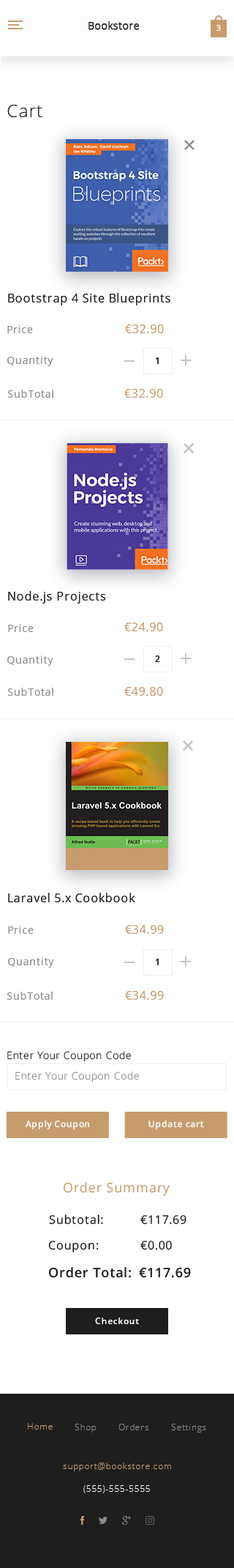
<style>
.page{position:relative;width:234px;height:1568px;background:#ffffff}
.page>*{position:absolute;margin:0}
.t1{font:17.6px "OpenSans-Light";letter-spacing:0.05em;color:#1e1e1c}
.t2{font:11.7px "OpenSans";letter-spacing:0.05em;color:#1e1e1c}
.t3{font:10.3px "OpenSans";letter-spacing:0.05em;color:#8c8c8c}
.t4{font:11.7px "OpenSans";letter-spacing:0.05em;color:#c69c6d}
.t5{font:8.8px "OpenSans-Semibold";letter-spacing:0.05em;color:#1e1e1c}
.t6{font:10.3px "OpenSans-Light";letter-spacing:0.05em;color:#1e1e1c}
.t7{font:10.3px "OpenSans-Light";letter-spacing:0.05em;color:#8c8c8c}
.t8{font:8.8px "OpenSans-Semibold";letter-spacing:0.05em;color:#fffefe}
.t9{font:13.2px "OpenSans";letter-spacing:0.05em;color:#c69c6d}
.t10{font:13.2px "OpenSans-Semibold";letter-spacing:0.05em;color:#1e1e1c}
</style>
<div class="page">
<p class="t1" style="left:7px;top:105px;width:35px;height:12px">Cart</p>
<p class="t2" style="left:8px;top:293px;width:163px;height:12px">Bootstrap 4 Site Blueprints</p>
<p class="t3" style="left:7px;top:325px;width:26px;height:8px">Price</p>
<p class="t4" style="left:125px;top:324px;width:39px;height:9px">€32.90</p>
<p class="t3" style="left:7px;top:356px;width:46px;height:10px">Quantity</p>
<p class="t5" style="left:156px;top:357px;width:3px;height:7px">1</p>
<p class="t3" style="left:8px;top:390px;width:45px;height:8px">SubTotal</p>
<p class="t4" style="left:125px;top:389px;width:38px;height:9px">€32.90</p>
<p class="t2" style="left:8px;top:591px;width:97px;height:12px">Node.js Projects</p>
<p class="t3" style="left:8px;top:624px;width:26px;height:8px">Price</p>
<p class="t4" style="left:125px;top:623px;width:38px;height:8px">€24.90</p>
<p class="t3" style="left:7px;top:655px;width:46px;height:11px">Quantity</p>
<p class="t5" style="left:155px;top:655px;width:5px;height:7px">2</p>
<p class="t3" style="left:8px;top:688px;width:45px;height:8px">SubTotal</p>
<p class="t4" style="left:125px;top:687px;width:38px;height:9px">€49.80</p>
<p class="t2" style="left:8px;top:893px;width:127px;height:9px">Laravel 5.x Cookbook</p>
<p class="t3" style="left:8px;top:926px;width:26px;height:8px">Price</p>
<p class="t4" style="left:125px;top:925px;width:39px;height:9px">€34.99</p>
<p class="t3" style="left:8px;top:957px;width:46px;height:10px">Quantity</p>
<p class="t5" style="left:156px;top:959px;width:3px;height:6px">1</p>
<p class="t3" style="left:7px;top:992px;width:46px;height:8px">SubTotal</p>
<p class="t4" style="left:125px;top:991px;width:39px;height:9px">€34.99</p>
<p class="t6" style="left:7px;top:1051px;width:124px;height:11px">Enter Your Coupon Code</p>
<p class="t7" style="left:15px;top:1071px;width:124px;height:11px">Enter Your Coupon Code</p>
<p class="t8" style="left:26px;top:1120px;width:64px;height:10px">Apply Coupon</p>
<p class="t8" style="left:149px;top:1120px;width:55px;height:10px">Update cart</p>
<p class="t9" style="left:63px;top:1182px;width:107px;height:14px">Order Summary</p>
<p class="t2" style="left:49px;top:1214px;width:54px;height:11px">Subtotal:</p>
<p class="t2" style="left:141px;top:1215px;width:46px;height:10px">€117.69</p>
<p class="t2" style="left:48px;top:1241px;width:51px;height:11px">Coupon:</p>
<p class="t2" style="left:141px;top:1241px;width:31px;height:9px">€0.00</p>
<p class="t10" style="left:48px;top:1267px;width:83px;height:11px">Order Total:</p>
<p class="t10" style="left:139px;top:1267px;width:52px;height:11px">€117.69</p>
<p class="t8" style="left:95px;top:1318px;width:44px;height:6px">Checkout</p>
</div>
